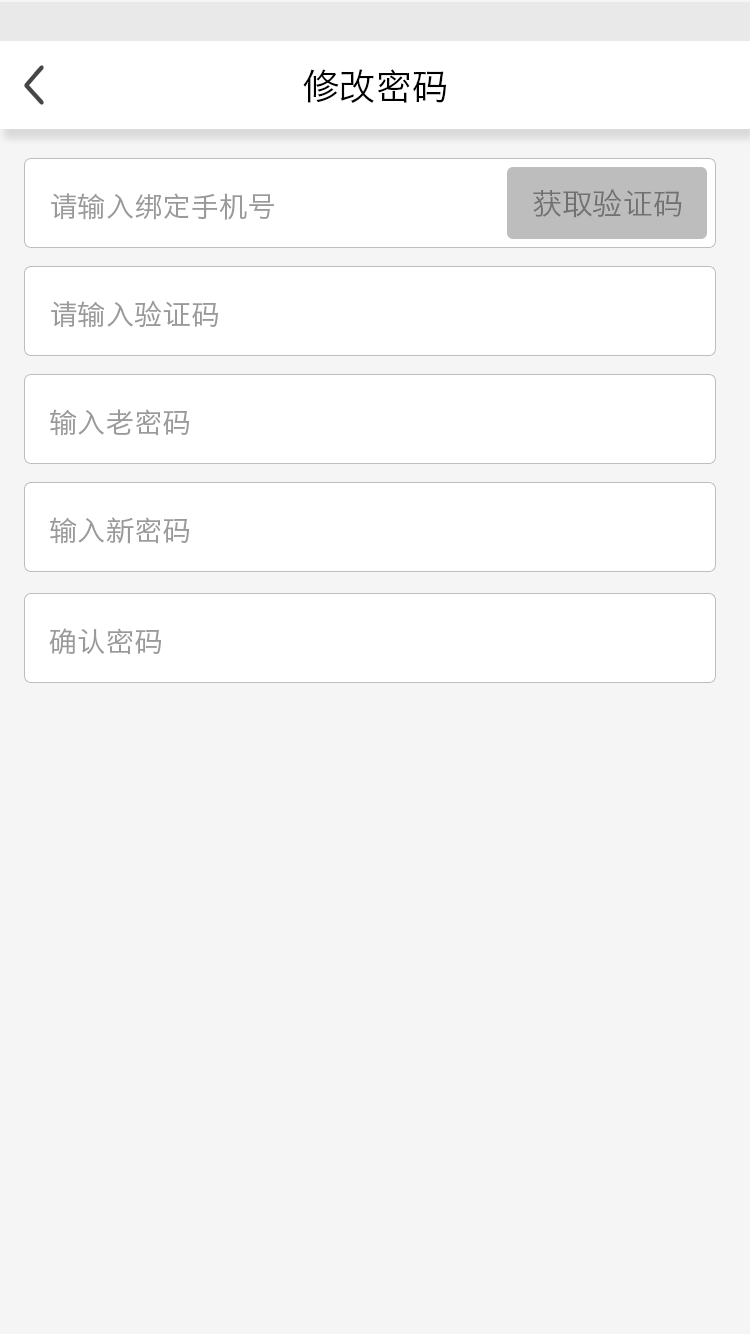
<style>
.page{position:relative;width:750px;height:1334px;background:#f5f5f5}
.page>*{position:absolute;margin:0}
.t1{font:36px "HiraginoSansGB-W3";color:#000000}
.t2{font:28px "HiraginoSansGB-W3";color:#9a9a9a}
.t3{font:30px "HiraginoSansGB-W3";color:#717171}
</style>
<div class="page">
<p class="t1" style="left:303px;top:69px;width:144px;height:34px">修改密码</p>
<p class="t2" style="left:51px;top:193px;width:223px;height:27px">请输入绑定手机号</p>
<p class="t3" style="left:533px;top:189px;width:149px;height:29px">获取验证码</p>
<p class="t2" style="left:51px;top:300px;width:167px;height:28px">请输入验证码</p>
<p class="t2" style="left:50px;top:409px;width:140px;height:27px">输入老密码</p>
<p class="t2" style="left:50px;top:517px;width:140px;height:27px">输入新密码</p>
<p class="t2" style="left:49px;top:628px;width:113px;height:27px">确认密码</p>
</div>
